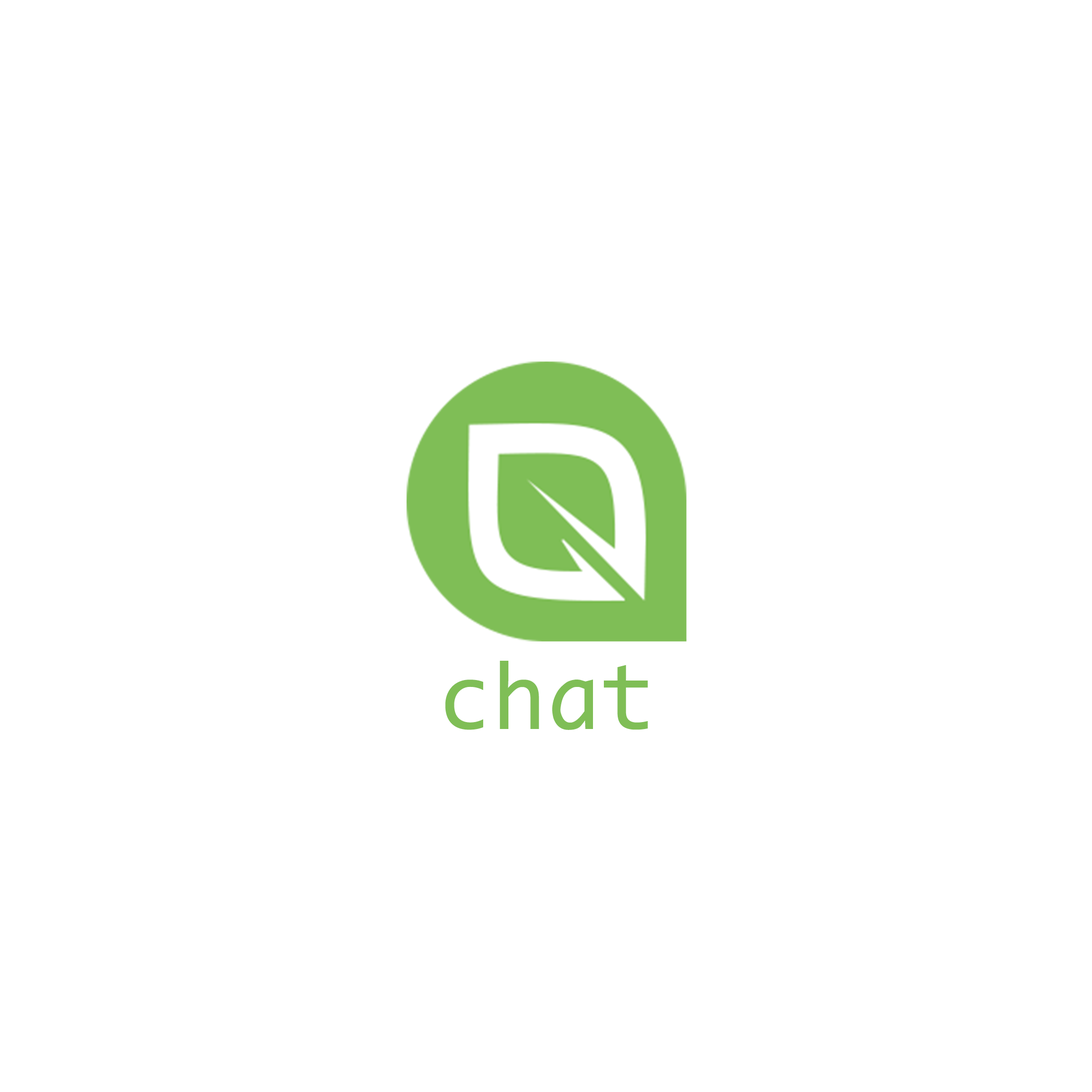
<style>
.page{position:relative;width:1092px;height:1092px;background:#ffffff}
.page>*{position:absolute;margin:0}
.t1{font:98.9px "CodeNewRoman";color:#7fbe56}
</style>
<div class="page">
<p class="t1" style="left:445px;top:661px;width:203px;height:69px">chat</p>
</div>
